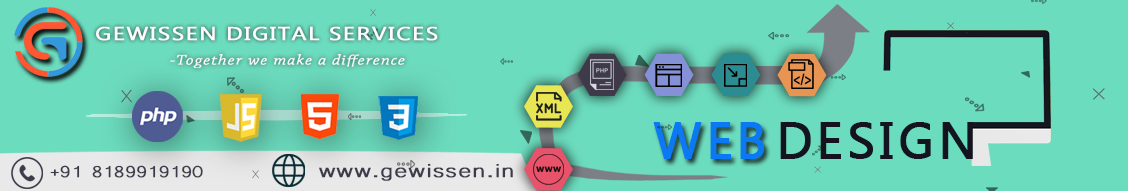
<style>
.page{position:relative;width:1128px;height:191px;background:#6cdcbe}
.page>*{position:absolute;margin:0}
.t1{font:18.9px "MicrosoftPhagsPa";letter-spacing:0.05em;color:#fcfcfc;font-weight:bold;scale:1.22 1}
.t2{font:14.4px "ChaparralPro-LightIt";letter-spacing:0.05em;color:#feffff;font-weight:bold;scale:1.21 1}
.t3{font:49.8px "MicrosoftTaiLe";letter-spacing:0.07em;color:#0b78f4;font-weight:bold}
.t4{font:49.8px "MicrosoftTaiLe";letter-spacing:0.07em;color:#131420;font-weight:bold}
.t5{font:20.6px "Microsoft-Yi-Baiti";letter-spacing:-0.08em;color:#3f3a49;font-weight:bold;scale:1.18 1}
.t6{font:24.5px "Microsoft-Yi-Baiti";letter-spacing:0.02em;color:#3f3a49;font-weight:bold;scale:1.24 1}
</style>
<div class="page">
<p class="t1" style="left:96px;top:26px;width:342px;height:15px">GEWISSEN DIGITAL SERVICES</p>
<p class="t2" style="left:170px;top:54px;width:235px;height:14px">-Together we make a difference</p>
<p class="t3" style="left:653px;top:122px;width:111px;height:37px">WEB</p>
<p class="t4" style="left:780px;top:122px;width:193px;height:37px">DESIGN</p>
<p class="t5" style="left:50px;top:165px;width:153px;height:13px">+91 8189919190</p>
<p class="t6" style="left:319px;top:163px;width:194px;height:18px">www.gewissen.in</p>
</div>
